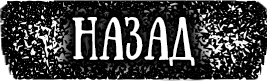
<style>
.page{position:relative;width:267px;height:81px;background:#000000}
.page>*{position:absolute;margin:0}
.t1{font:42.7px "Sunday-Regular";color:#ffffff}
</style>
<div class="page">
<p class="t1" style="left:72px;top:17px;width:123px;height:49px">назад</p>
</div>
